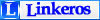
<style>
.page{position:relative;width:100px;height:20px}
.page>*{position:absolute;margin:0}
.t1{font:18px "PiratesBay";color:#eff0f4;font-weight:bold}
.t2{font:18px "PiratesBay";color:#0006ff;font-weight:bold}
</style>
<div class="page">
<p class="t1" style="left:5px;top:4px;width:11px;height:13px">L</p>
<p class="t2" style="left:26px;top:1px;width:65px;height:16px">Linkeros</p>
</div>
